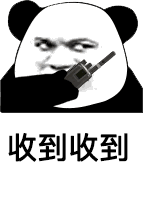
<style>
.page{position:relative;width:143px;height:204px;background:#ffffff}
.page>*{position:absolute;margin:0}
.t1{font:30px "PingFangSC-Regular";color:#000000;font-weight:bold}
</style>
<div class="page">
<p class="t1" style="left:8px;top:133px;width:120px;height:29px">收到收到</p>
</div>
